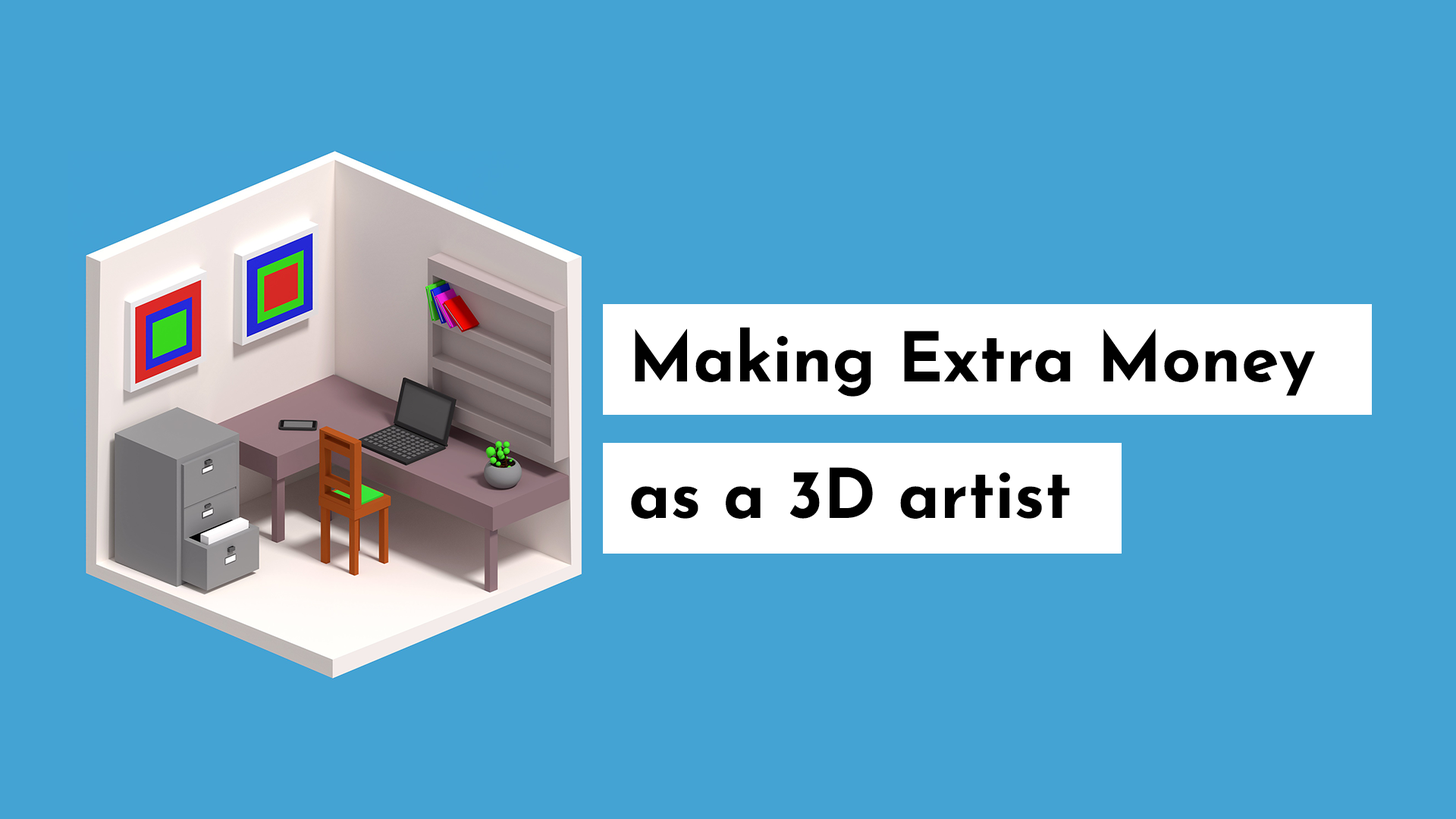
<style>
.page{position:relative;width:1456px;height:819px;background:#44a3d3}
.page>*{position:absolute;margin:0}
.t1{font:68.2px/136.5px "JosefinSans-Bold";color:#000000}
</style>
<div class="page">
<p class="t1" style="left:631px;top:327px;width:684px;height:192px">Making Extra Money <br>as a 3D artist</p>
</div>
